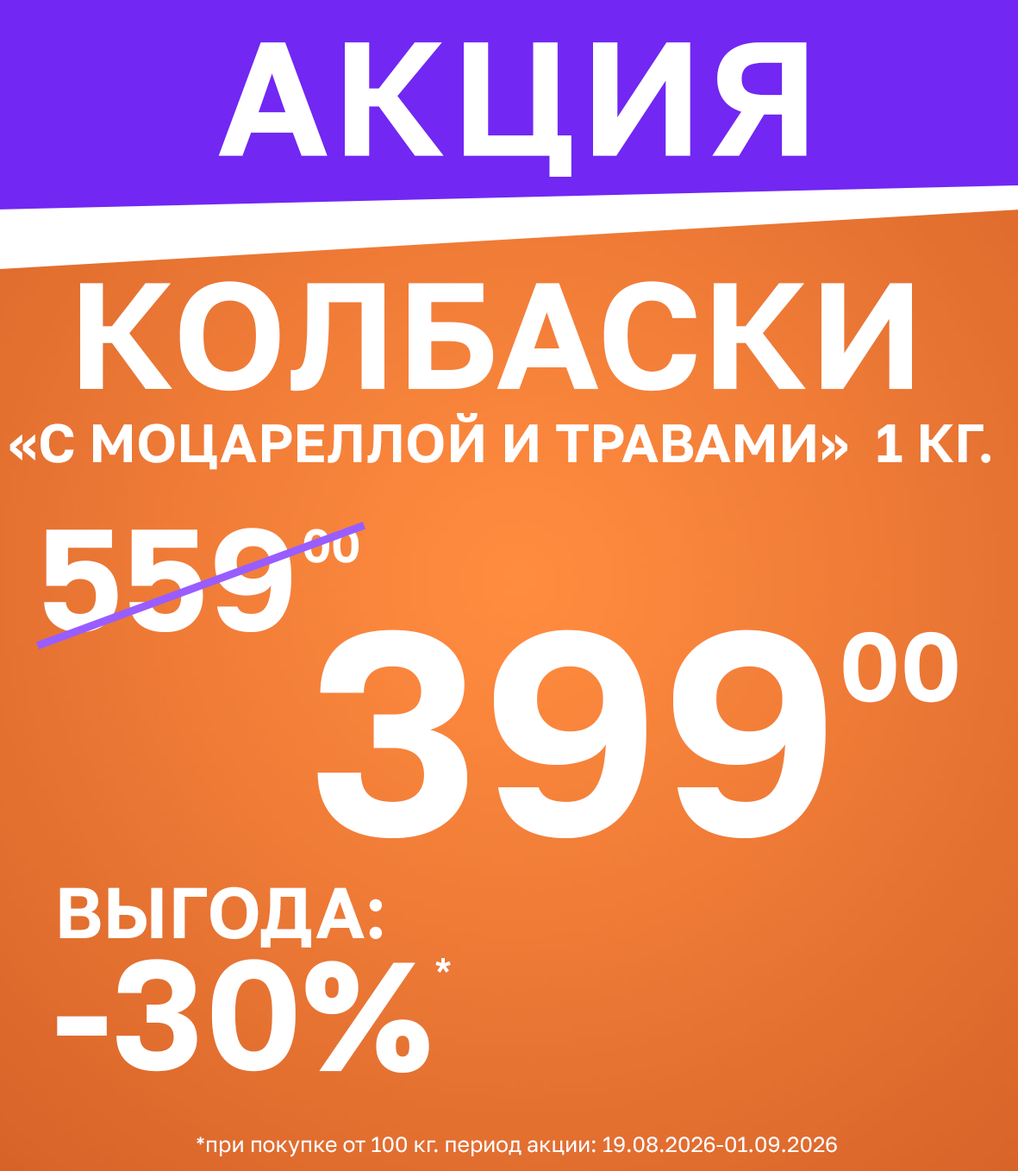
<style>
.page{position:relative;width:1018px;height:1171px}
.page>*{position:absolute;margin:0}
.t1{font:161.7px "GolosText-SemiBold";letter-spacing:0.025em;color:#ffffff}
.t2{font:150.9px "GolosText-SemiBold";color:#ffffff}
.t3{font:53.9px "GolosText-SemiBold";color:#ffffff}
.t4{font:143.7px "GolosText-SemiBold";color:#ffffff}
.t5{font:46.7px "GolosText-SemiBold";color:#ffffff}
.t6{font:287.4px "GolosText-SemiBold";color:#ffffff}
.t7{font:97px "GolosText-SemiBold";color:#ffffff}
.t8{font:71.9px "GolosText-SemiBold";color:#ffffff}
.t9{font:154.5px "GolosText-SemiBold";color:#ffffff}
.t10{font:35.9px "AAvanteIntBold";color:#ffffff}
.t11{font:21.6px "GolosText-Regular";color:#ffffff}
</style>
<div class="page">
<p class="t1" style="left:218px;top:42px;width:589px;height:135px">АКЦИЯ</p>
<p class="t2" style="left:80px;top:281px;width:832px;height:110px">КОЛБАСКИ</p>
<p class="t3" style="left:9px;top:413px;width:982px;height:57px">«С МОЦАРЕЛЛОЙ И ТРАВАМИ»  1 КГ.</p>
<p class="t4" style="left:44px;top:528px;width:247px;height:104px">559</p>
<p class="t5" style="left:304px;top:529px;width:55px;height:34px">00</p>
<p class="t6" style="left:317px;top:629px;width:509px;height:209px">399</p>
<p class="t7" style="left:843px;top:631px;width:115px;height:72px">00</p>
<p class="t8" style="left:59px;top:886px;width:323px;height:62px">ВЫГОДА:</p>
<p class="t9" style="left:57px;top:959px;width:372px;height:115px">-30%</p>
<p class="t10" style="left:435px;top:958px;width:16px;height:15px">*</p>
<p class="t11" style="left:197px;top:1136px;width:640px;height:21px">*при покупке от 100 кг. период акции: 19.08.2026-01.09.2026</p>
</div>
